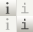
<style>
.page{position:relative;width:33px;height:32px;background:#f4f4ef}
.page>*{position:absolute;margin:0}
.t1{font:17px "Baskerville";letter-spacing:0.01em;color:#4c4c4a;font-weight:bold}
.t2{font:16px "CourierNewPSMT";letter-spacing:0.01em;color:#aaaaa7;font-weight:bold}
.t3{font:17px "Baskerville";letter-spacing:0.01em;color:#aaaaa7;font-weight:bold}
.t4{font:16px "CourierNewPSMT";letter-spacing:0.01em;color:#555453;font-weight:bold}
</style>
<div class="page">
<p class="t1" style="left:5px;top:2px;width:5px;height:12px">i</p>
<p class="t2" style="left:21px;top:2px;width:8px;height:12px">i</p>
<p class="t3" style="left:5px;top:18px;width:5px;height:12px">i</p>
<p class="t4" style="left:21px;top:18px;width:8px;height:12px">i</p>
</div>
